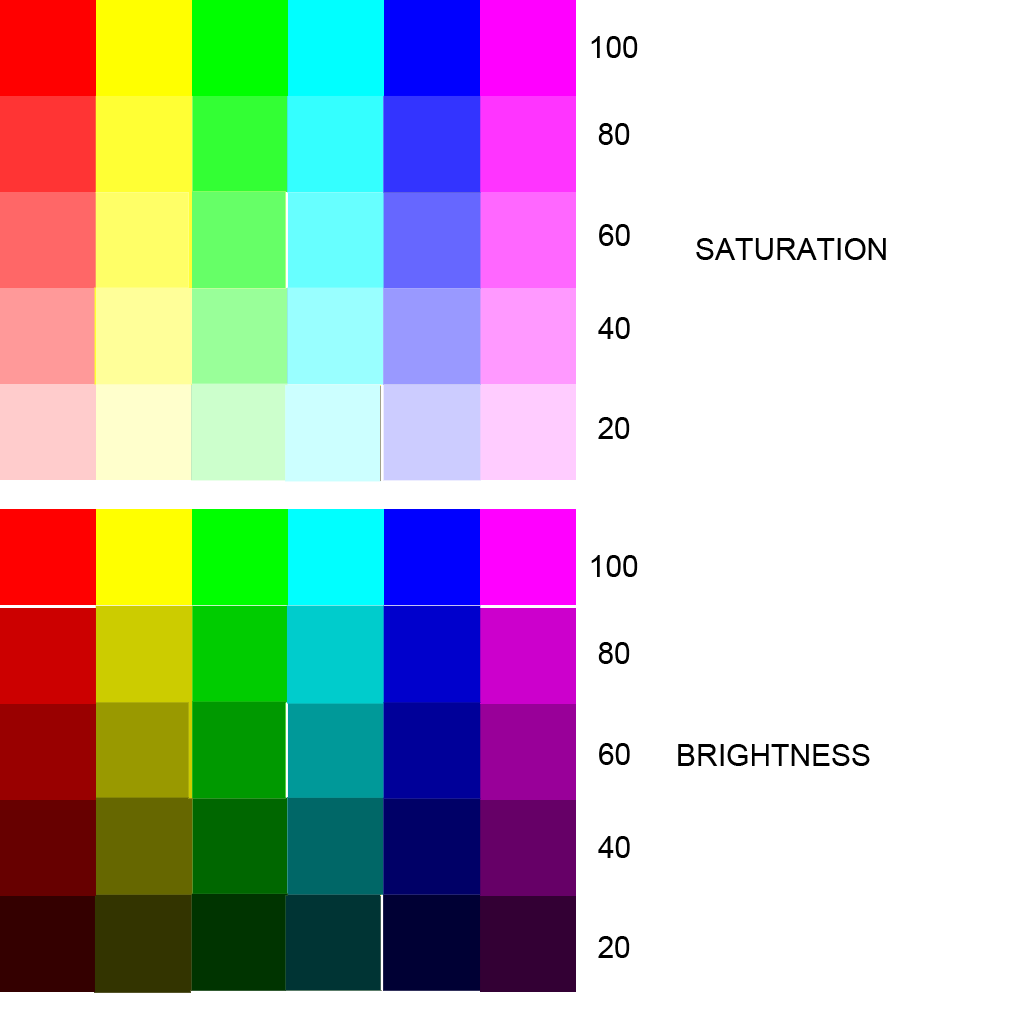
<style>
.page{position:relative;width:1024px;height:1024px;background:#ffffff}
.page>*{position:absolute;margin:0}
.t1{font:30px "ArialMT";color:#000000}
</style>
<div class="page">
<p class="t1" style="left:591px;top:36px;width:47px;height:22px">100</p>
<p class="t1" style="left:598px;top:123px;width:32px;height:22px">80</p>
<p class="t1" style="left:599px;top:224px;width:31px;height:22px">60</p>
<p class="t1" style="left:696px;top:238px;width:190px;height:22px">SATURATION</p>
<p class="t1" style="left:598px;top:317px;width:32px;height:22px">40</p>
<p class="t1" style="left:598px;top:417px;width:32px;height:22px">20</p>
<p class="t1" style="left:591px;top:555px;width:47px;height:22px">100</p>
<p class="t1" style="left:598px;top:642px;width:32px;height:22px">80</p>
<p class="t1" style="left:599px;top:743px;width:31px;height:22px">60</p>
<p class="t1" style="left:678px;top:744px;width:192px;height:22px">BRIGHTNESS</p>
<p class="t1" style="left:598px;top:836px;width:32px;height:22px">40</p>
<p class="t1" style="left:598px;top:936px;width:32px;height:22px">20</p>
</div>
